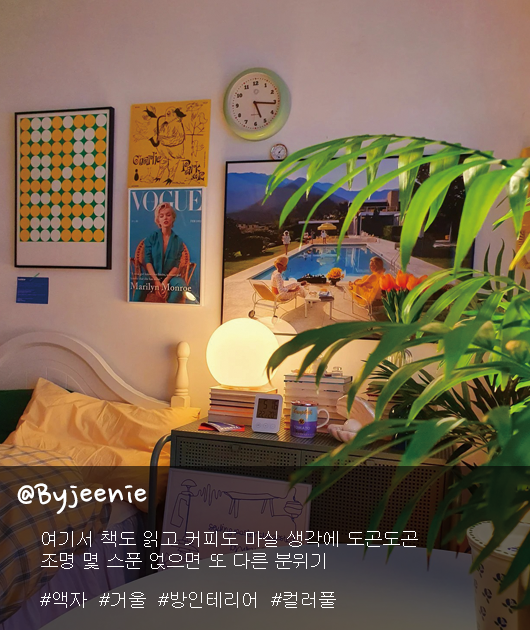
<style>
.page{position:relative;width:530px;height:630px}
.page>*{position:absolute;margin:0}
.t1{font:39.7px "NanumPen";color:#ffffff}
.t2{font:18px "Gulim";color:#ffffff}
</style>
<div class="page">
<p class="t1" style="left:17px;top:483px;width:130px;height:31px">@Byjeenie</p>
<p class="t2" style="left:41px;top:531px;width:377px;height:38px">여기서 책도 읽고 커피도 마실 생각에 도곤도곤<br>조명 몇 스푼 얹으면 또 다른 분위기</p>
<p class="t2" style="left:40px;top:592px;width:296px;height:16px">#액자  #거울  #방인테리어  #컬러풀</p>
</div>
